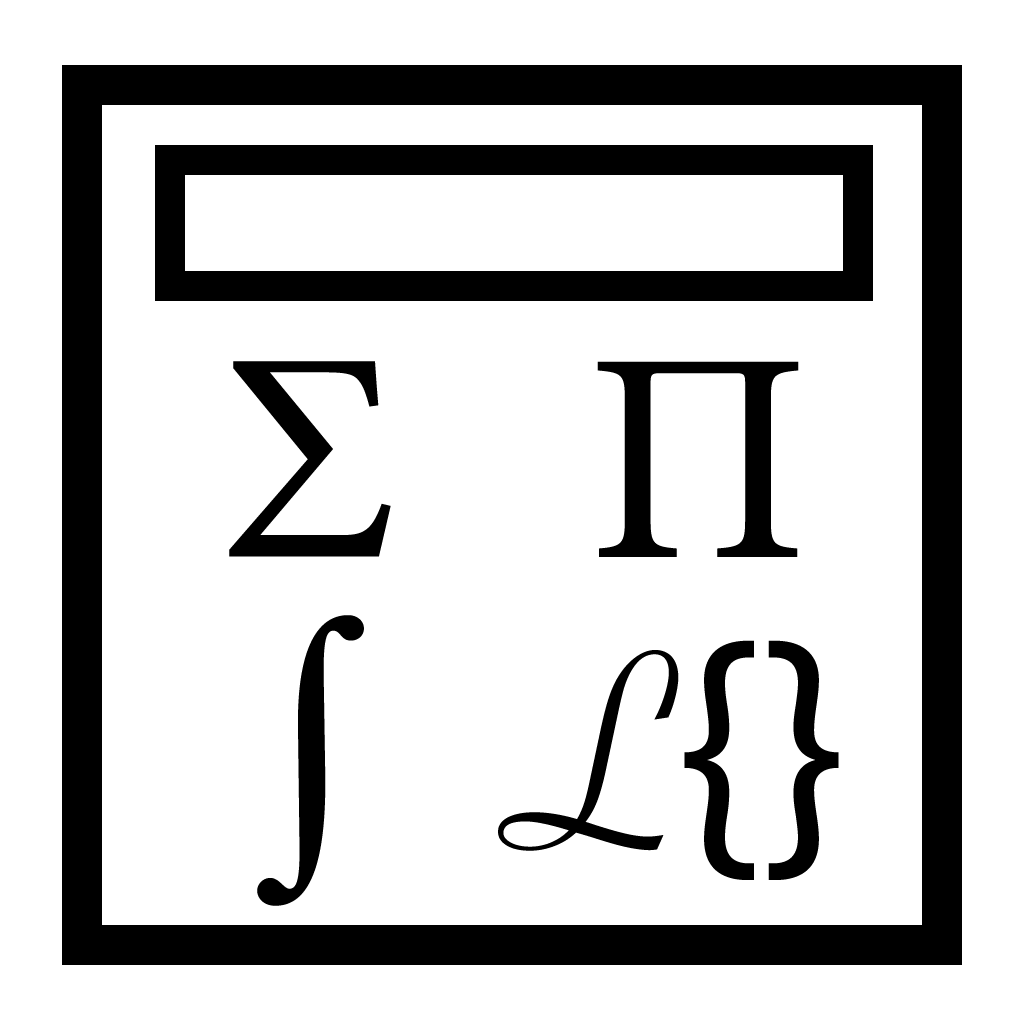
<style>
.page{position:relative;width:1024px;height:1024px;background:#ffffff}
.page>*{position:absolute;margin:0}
.t1{font:300px "MinionPro-Regular";color:#000000}
.t2{font:300px "MyriadPro-Regular";color:#000000}
.t3{font:300px "SavoyeLetPlain";color:#000000}
</style>
<div class="page">
<p class="t1" style="left:229px;top:361px;width:162px;height:196px">Σ</p>
<p class="t1" style="left:597px;top:361px;width:202px;height:196px">Π</p>
<p class="t1" style="left:257px;top:615px;width:107px;height:291px">∫</p>
<p class="t2" style="left:498px;top:640px;width:341px;height:240px"><span class="t3">L</span>{}</p>
</div>
